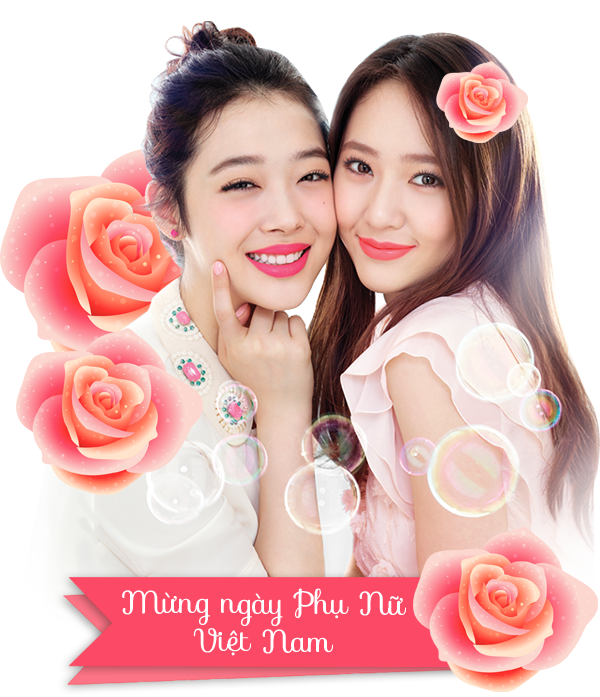
<style>
.page{position:relative;width:600px;height:697px;background:#ffffff}
.page>*{position:absolute;margin:0}
.t1{font:31.5px "SVN-Sofia";color:#ffffff}
</style>
<div class="page">
<p class="t1" style="left:122px;top:588px;width:284px;height:68px;text-align:center">Mừng ngày Phụ Nữ<br>Việt Nam</p>
</div>
